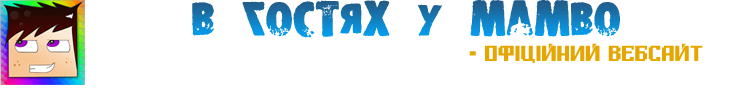
<style>
.page{position:relative;width:744px;height:91px;background:#ffffff}
.page>*{position:absolute;margin:0}
.t1{font:45px "DSStamper"}
.t2{font:19px "DigitalThin";color:#e5a601}
</style>
<div class="page">
<p class="t1" style="left:192px;top:0px;width:428px;height:38px">в гостях у mambo</p>
<p class="t2" style="left:469px;top:43px;width:234px;height:20px">- офіційний вебсайт</p>
</div>
